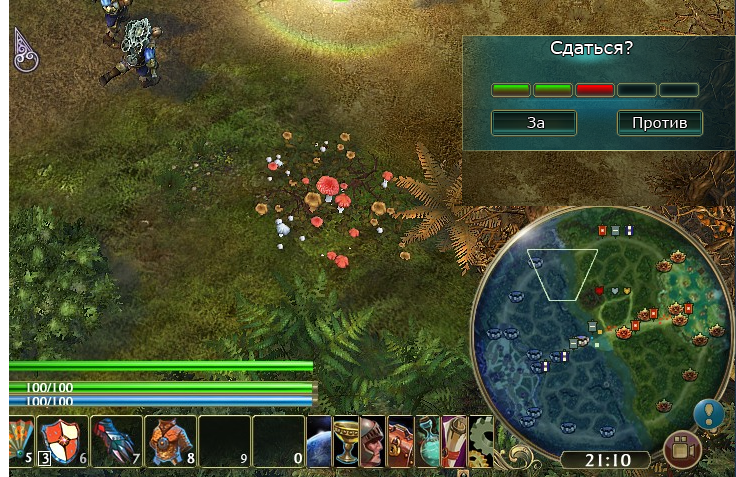
<style>
.page{position:relative;width:736px;height:477px}
.page>*{position:absolute;margin:0}
.t1{font:17.9px "Verdana";color:#ffffff}
.t2{font:15px "Verdana";color:#ffffff}
</style>
<div class="page">
<p class="t1" style="left:550px;top:41px;width:83px;height:15px">Сдаться?</p>
<p class="t2" style="left:527px;top:117px;width:18px;height:11px">За</p>
<p class="t2" style="left:633px;top:117px;width:54px;height:14px">Против</p>
</div>
